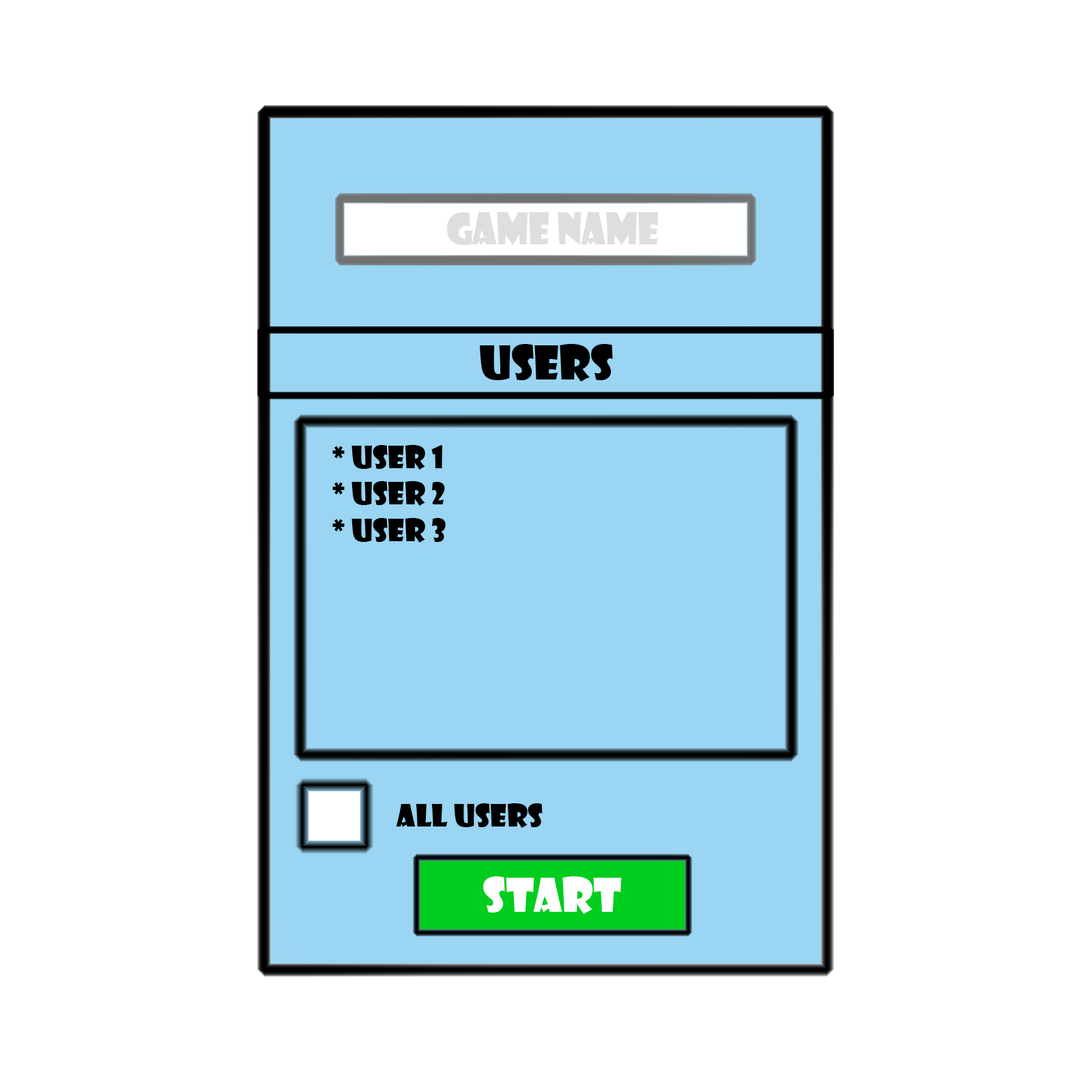
<style>
.page{position:relative;width:1092px;height:1092px;background:#ffffff}
.page>*{position:absolute;margin:0}
.t1{font:42.3px "ShowcardGothic-Reg";color:#dedede;scale:0.91 1}
.t2{font:45.5px "ShowcardGothic-Reg";color:#000000}
.t3{font:30.3px "ShowcardGothic-Reg";color:#000000}
.t4{font:45.5px "ShowcardGothic-Reg";color:#ffffff}
</style>
<div class="page">
<p class="t1" style="left:447px;top:212px;width:212px;height:33px">game name</p>
<p class="t2" style="left:480px;top:344px;width:133px;height:38px">Users</p>
<p class="t3" style="left:332px;top:445px;width:114px;height:98px">* User 1<br>* User 2<br>* User 3</p>
<p class="t3" style="left:396px;top:803px;width:147px;height:25px">All Users</p>
<p class="t4" style="left:483px;top:876px;width:139px;height:38px">Start</p>
</div>
